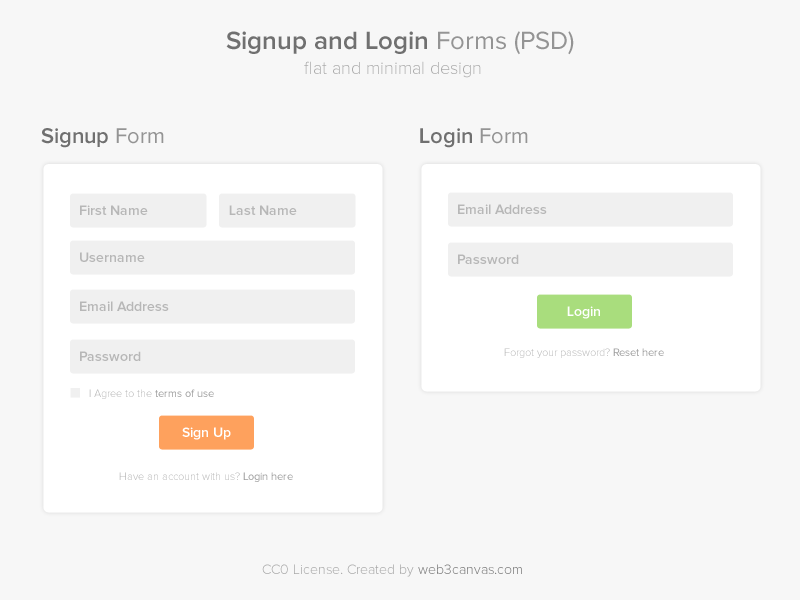
<style>
.page{position:relative;width:800px;height:600px;background:#f7f7f7}
.page>*{position:absolute;margin:0}
.t1{font:26px "ProximaNova-Semibold";color:#707070}
.t2{font:26px "ProximaNova-Regular";color:#949494}
.t3{font:18px "ProximaNova-Light";color:#aaaaaa}
.t4{font:22px "ProximaNova-Semibold";color:#707070}
.t5{font:22px "ProximaNova-Regular";color:#949494}
.t6{font:14px "ProximaNova-Semibold";color:#b7b7b7}
.t7{font:14px "ProximaNova-Semibold";color:#ffffff}
.t8{font:11px "ProximaNova-Light";color:#b7b7b7}
.t9{font:11px "ProximaNova-Regular";color:#9b9b9b}
.t10{font:14px "ProximaNova-Light";color:#a8a8a8}
.t11{font:14px "ProximaNova-Light";color:#787878}
</style>
<div class="page">
<p class="t1" style="left:226px;top:31px;width:348px;height:24px">Signup and Login <span class="t2">Forms (PSD)</span></p>
<p class="t3" style="left:304px;top:61px;width:177px;height:17px">flat and minimal design</p>
<p class="t4" style="left:41px;top:128px;width:123px;height:20px">Signup <span class="t5">Form</span></p>
<p class="t4" style="left:420px;top:128px;width:108px;height:20px">Login <span class="t5">Form</span></p>
<p class="t6" style="left:80px;top:205px;width:68px;height:10px">First Name</p>
<p class="t6" style="left:229px;top:205px;width:68px;height:10px">Last Name</p>
<p class="t6" style="left:458px;top:204px;width:89px;height:10px">Email Address</p>
<p class="t6" style="left:80px;top:252px;width:65px;height:10px">Username</p>
<p class="t6" style="left:458px;top:254px;width:61px;height:10px">Password</p>
<p class="t6" style="left:80px;top:301px;width:89px;height:10px">Email Address</p>
<p class="t7" style="left:567px;top:306px;width:33px;height:13px">Login</p>
<p class="t6" style="left:80px;top:351px;width:61px;height:10px">Password</p>
<p class="t8" style="left:504px;top:348px;width:160px;height:10px">Forgot your password? <span class="t9">Reset here</span></p>
<p class="t8" style="left:89px;top:389px;width:125px;height:10px">I Agree to the <span class="t9">terms of use</span></p>
<p class="t7" style="left:182px;top:427px;width:49px;height:13px">Sign Up</p>
<p class="t8" style="left:119px;top:472px;width:174px;height:10px">Have an account with us? <span class="t9">Login here</span></p>
<p class="t10" style="left:262px;top:564px;width:260px;height:13px">CC0 License. Created by <span class="t11">web3canvas.com</span></p>
</div>
